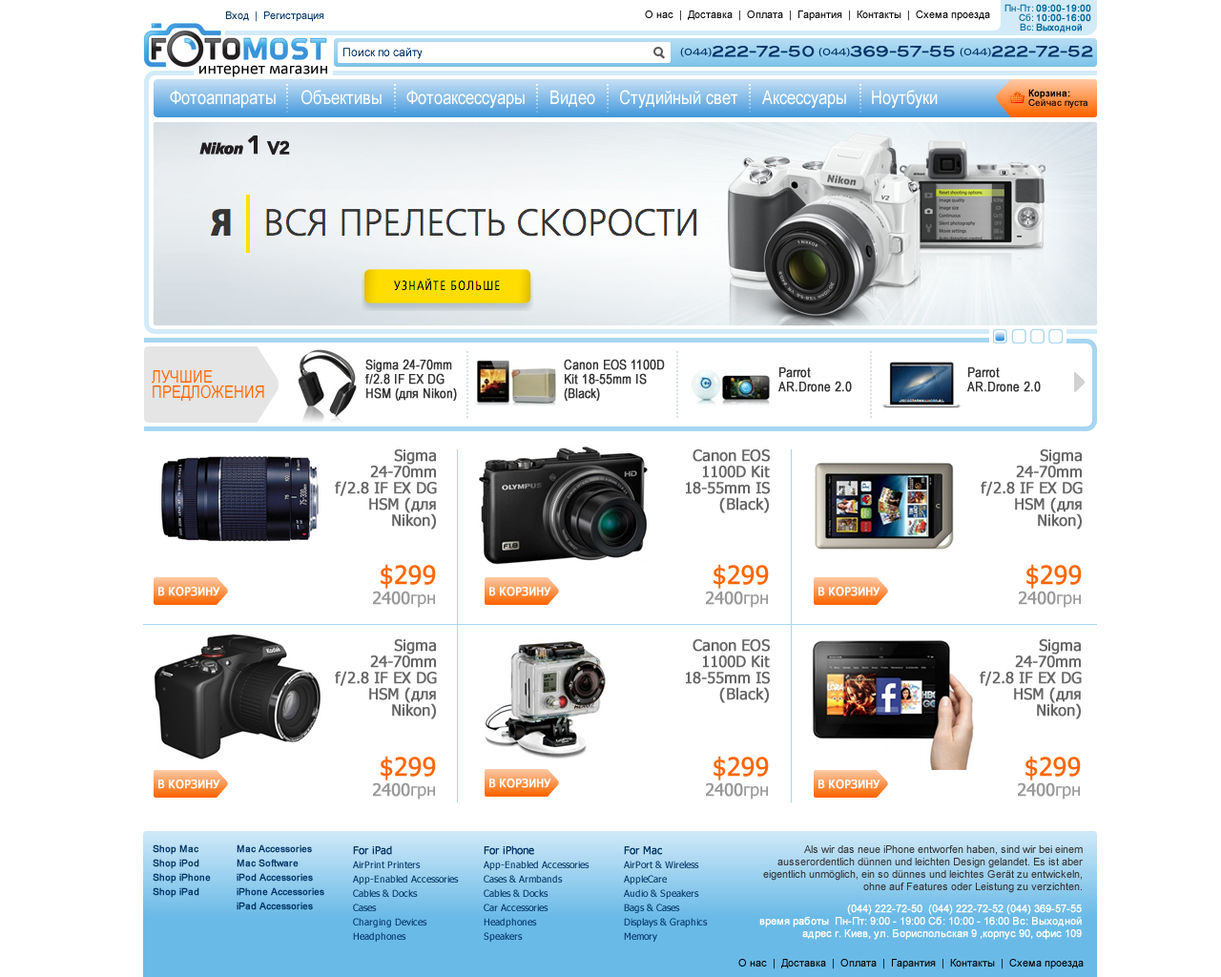
<style>
.page{position:relative;width:1221px;height:977px;background:#ffffff}
.page>*{position:absolute;margin:0}
.t1{font:9.5px/9.5px "ArialMT";color:#006699}
.t2{font:9.5px/9.5px "ArialMT";color:#006699;font-weight:bold}
.t3{font:10.5px "ArialMT";color:#003366}
.t4{font:10.5px "ArialMT";color:#000000}
.t5{font:9.5px "BlairMdITCTTMedium";color:#003366}
.t6{font:14.3px "BlairMdITCTTMedium";color:#003366;font-weight:bold}
.t7{font:19.1px "ArialNarrow";color:#ffffff}
.t8{font:9.5px/9.5px "ArialMT";color:#000000}
.t9{font:9.5px/9.5px "ArialMT";color:#000000;font-weight:bold}
.t10{font:13.4px/14px "ArialNarrow";color:#333333;font-weight:bold}
.t11{font:17.2px/15.5px "ArialNarrow";color:#ff6600}
.t12{font:15.3px/16px "Tahoma";color:#666666;font-weight:bold}
.t13{font:24.8px "Tahoma";color:#ff6600;font-weight:bold}
.t14{font:11.4px "Tahoma";color:#ffffff;font-weight:bold}
.t15{font:17.2px "Tahoma";color:#999999;font-weight:bold}
.t16{font:17.2px "Tahoma";color:#999999}
.t17{font:9.5px/14.3px "ArialMT";color:#003366;font-weight:bold}
.t18{font:9.5px/14.3px "Tahoma";color:#003366}
.t19{font:10.5px/15.7px "Tahoma";color:#003366;font-weight:bold}
.t20{font:10.5px/12.6px "ArialMT";color:#333333}
.t21{font:10.5px/12.6px "ArialMT";color:#ffffff;font-weight:bold}
</style>
<div class="page">
<p class="t1" style="left:1004px;top:4px;width:29px;height:27px;text-align:right">Пн-Пт:<br>Сб:<br>Вс:</p>
<p class="t2" style="left:1036px;top:4px;width:55px;height:28px">09:00-19:00<br>10:00-16:00<br>Выходной</p>
<p class="t3" style="left:226px;top:11px;width:98px;height:11px">Вход  |  Регистрация</p>
<p class="t4" style="left:645px;top:10px;width:345px;height:11px">О нас  |  Доставка  |  Оплата  |  Гарантия  |  Контакты  |  Схема проезда</p>
<p class="t5" style="left:680px;top:48px;width:32px;height:9px">(044)</p>
<p class="t6" style="left:712px;top:46px;width:381px;height:11px">222-72-50         369-57-55         222-72-52</p>
<p class="t5" style="left:818px;top:48px;width:32px;height:9px">(044)</p>
<p class="t5" style="left:960px;top:48px;width:31px;height:9px">(044)</p>
<p class="t7" style="left:170px;top:90px;width:768px;height:19px">Фотоаппараты     Объективы     Фотоаксессуары     Видео     Студийный свет     Аксессуары     Ноутбуки</p>
<p class="t8" style="left:1028px;top:89px;width:59px;height:19px"><span class="t9">Корзина:<br></span>Сейчас пуста</p>
<p class="t10" style="left:365px;top:359px;width:92px;height:42px">Sigma 24-70mm f/2.8 IF EX DG HSM (для Nikon)</p>
<p class="t10" style="left:564px;top:359px;width:101px;height:42px">Canon EOS 1100D Kit 18-55mm IS (Black)</p>
<p class="t11" style="left:152px;top:370px;width:112px;height:31px">ЛУЧШИЕ<br>ПРЕДЛОЖЕНИЯ</p>
<p class="t10" style="left:778px;top:367px;width:74px;height:25px">Parrot AR.Drone 2.0</p>
<p class="t10" style="left:967px;top:367px;width:74px;height:25px">Parrot AR.Drone 2.0</p>
<p class="t12" style="left:335px;top:449px;width:102px;height:80px;text-align:right">Sigma<br>24-70mm f/2.8 IF EX DG HSM (для Nikon)</p>
<p class="t12" style="left:686px;top:449px;width:84px;height:64px;text-align:right">Canon EOS 1100D Kit 18-55mm IS (Black)</p>
<p class="t12" style="left:981px;top:449px;width:102px;height:80px;text-align:right">Sigma<br>24-70mm f/2.8 IF EX DG HSM (для Nikon)</p>
<p class="t13" style="left:381px;top:564px;width:55px;height:25px">$299</p>
<p class="t13" style="left:713px;top:564px;width:56px;height:25px">$299</p>
<p class="t13" style="left:1026px;top:564px;width:56px;height:25px">$299</p>
<p class="t14" style="left:158px;top:587px;width:62px;height:9px">В КОРЗИНУ</p>
<p class="t15" style="left:373px;top:590px;width:62px;height:18px">2400<span class="t16">грн</span></p>
<p class="t14" style="left:489px;top:587px;width:62px;height:9px">В КОРЗИНУ</p>
<p class="t15" style="left:706px;top:590px;width:62px;height:18px">2400<span class="t16">грн</span></p>
<p class="t14" style="left:818px;top:587px;width:62px;height:9px">В КОРЗИНУ</p>
<p class="t15" style="left:1019px;top:590px;width:62px;height:18px">2400<span class="t16">грн</span></p>
<p class="t12" style="left:335px;top:639px;width:102px;height:80px;text-align:right">Sigma<br>24-70mm f/2.8 IF EX DG HSM (для Nikon)</p>
<p class="t12" style="left:686px;top:639px;width:84px;height:64px;text-align:right">Canon EOS 1100D Kit 18-55mm IS (Black)</p>
<p class="t12" style="left:980px;top:639px;width:102px;height:80px;text-align:right">Sigma<br>24-70mm f/2.8 IF EX DG HSM (для Nikon)</p>
<p class="t13" style="left:381px;top:755px;width:55px;height:25px">$299</p>
<p class="t13" style="left:713px;top:755px;width:56px;height:25px">$299</p>
<p class="t13" style="left:1025px;top:755px;width:56px;height:25px">$299</p>
<p class="t15" style="left:373px;top:782px;width:62px;height:17px">2400<span class="t16">грн</span></p>
<p class="t15" style="left:706px;top:782px;width:62px;height:17px">2400<span class="t16">грн</span></p>
<p class="t15" style="left:1018px;top:782px;width:62px;height:17px">2400<span class="t16">грн</span></p>
<p class="t17" style="left:153px;top:844px;width:58px;height:54px">Shop Mac<br>Shop iPod<br>Shop iPhone<br>Shop iPad</p>
<p class="t17" style="left:237px;top:844px;width:87px;height:66px">Mac Accessories<br>Mac Software<br>iPod Accessories<br>iPhone Accessories<br>iPad Accessories</p>
<p class="t18" style="left:353px;top:845px;width:106px;height:96px"><span class="t19">For iPad<br></span>AirPrint Printers<br>App-Enabled Accessories<br>Cables &amp; Docks<br>Cases<br>Charging Devices<br>Headphones</p>
<p class="t18" style="left:484px;top:845px;width:105px;height:96px"><span class="t19">For iPhone<br></span>App-Enabled Accessories<br>Cases &amp; Armbands<br>Cables &amp; Docks<br>Car Accessories<br>Headphones<br>Speakers</p>
<p class="t20" style="left:763px;top:845px;width:320px;height:48px;text-align:right">Als wir das neue iPhone entworfen haben, sind wir bei einem ausserordentlich dünnen und leichten Design gelandet. Es ist aber eigentlich unmöglich, ein so dünnes und leichtes Gerät zu entwickeln, ohne auf Features oder Leistung zu verzichten.</p>
<p class="t18" style="left:624px;top:846px;width:84px;height:95px"><span class="t19">For Mac<br></span>AirPort &amp; Wireless<br>AppleCare<br>Audio &amp; Speakers<br>Bags &amp; Cases<br>Displays &amp; Graphics<br>Memory</p>
<p class="t21" style="left:759px;top:904px;width:323px;height:36px;text-align:right">(044) 222-72-50  (044) 222-72-52 (044) 369-57-55<br>время работы  Пн-Пт: 9:00 - 19:00 Сб: 10:00 - 16:00 Вс: Выходной адрес г. Киев, ул. Бориспольская 9 ,корпус 90, офис 109</p>
<p class="t4" style="left:738px;top:959px;width:346px;height:10px">О нас  |  Доставка  |  Оплата  |  Гарантия  |  Контакты  |  Схема проезда</p>
</div>
